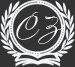
<style>
.page{position:relative;width:75px;height:67px;background:#333333}
.page>*{position:absolute;margin:0}
.t1{font:36px "AlexandraZeferinoOne";color:#ffffff}
</style>
<div class="page">
<p class="t1" style="left:16px;top:12px;width:47px;height:32px">СЗ</p>
</div>
